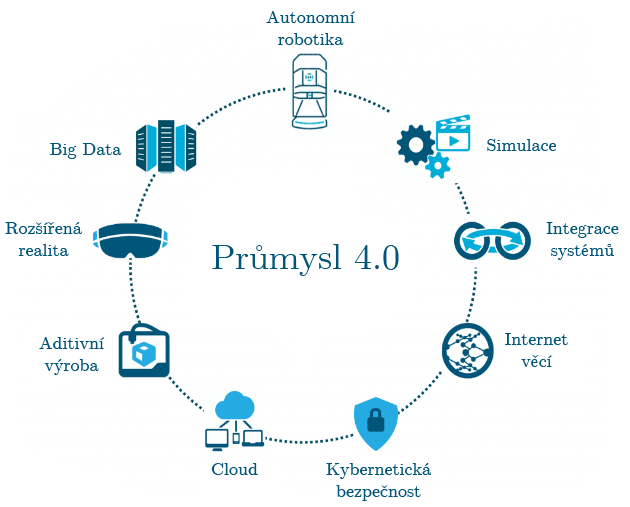
<style>
.page{position:relative;width:630px;height:507px;background:#ffffff}
.page>*{position:absolute;margin:0}
.t1{font:18px "CMUSerif-Roman";color:#005579}
.t2{font:36px "CMUSerif-Roman";color:#005579}
</style>
<div class="page">
<p class="t1" style="left:266px;top:11px;width:89px;height:34px;text-align:center">Autonomní<br>robotika</p>
<p class="t1" style="left:50px;top:143px;width:72px;height:16px">Big Data</p>
<p class="t1" style="left:487px;top:139px;width:69px;height:12px">Simulace</p>
<p class="t1" style="left:5px;top:222px;width:77px;height:34px;text-align:center">Rozšířená<br>realita</p>
<p class="t1" style="left:546px;top:222px;width:73px;height:38px;text-align:center">Integrace<br>systémů</p>
<p class="t2" style="left:212px;top:244px;width:187px;height:32px">Průmysl 4.0</p>
<p class="t1" style="left:39px;top:337px;width:65px;height:38px;text-align:center">Aditivní<br>výroba</p>
<p class="t1" style="left:505px;top:333px;width:63px;height:34px;text-align:center">Internet<br>věcí</p>
<p class="t1" style="left:211px;top:463px;width:47px;height:12px">Cloud</p>
<p class="t1" style="left:326px;top:463px;width:105px;height:38px;text-align:center">Kybernetická<br>bezpečnost</p>
</div>
